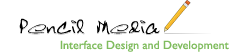
<style>
.page{position:relative;width:230px;height:53px;background:#ffffff}
.page>*{position:absolute;margin:0}
.t1{font:12px "GillSans";color:#80bc5e}
</style>
<div class="page">
<p class="t1" style="left:60px;top:40px;width:169px;height:12px">Interface Design and Development</p>
</div>
